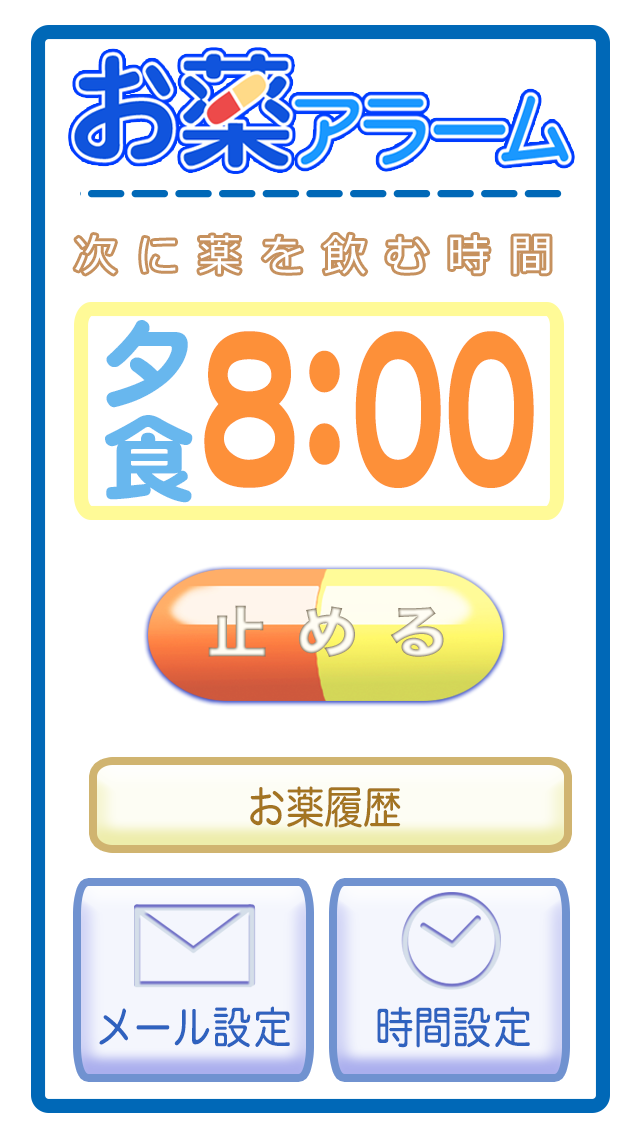
<style>
.page{position:relative;width:640px;height:1136px;background:#ffffff}
.page>*{position:absolute;margin:0}
.t1{font:85.5px/90.3px "DFMaruGothic-SB-MP-RKSJ-H";color:#68b7ee;scale:1.23 1}
.t2{font:204px "DFMaruGothic-SB-MP-RKSJ-H";letter-spacing:-0.36em;color:#fd9039;scale:0.65 1}
.t3{font:56.6px "HiraKakuStdN-W8";letter-spacing:0.46em;scale:1.1 1}
.t4{font:44px "HiraMaruPro-W4";color:#a37421;scale:0.88 1}
.t5{font:44px "HiraMaruPro-W4";color:#2f62bf;scale:0.88 1}
</style>
<div class="page">
<p class="t1" style="left:105px;top:320px;width:88px;height:183px;text-align:center">夕食</p>
<p class="t2" style="left:204px;top:331px;width:330px;height:157px">８：００</p>
<p class="t3" style="left:208px;top:605px;width:236px;height:52px">止める</p>
<p class="t4" style="left:250px;top:786px;width:151px;height:42px">お薬履歴</p>
<p class="t5" style="left:99px;top:1006px;width:191px;height:42px">メール設定</p>
<p class="t5" style="left:377px;top:1006px;width:153px;height:42px">時間設定</p>
</div>
